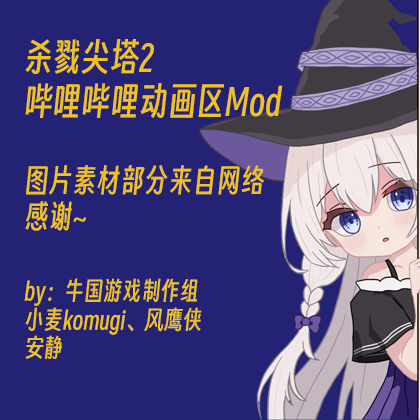
<style>
.page{position:relative;width:420px;height:420px;background:#232275}
.page>*{position:absolute;margin:0}
.t1{font:36px "SmileySans-Oblique";color:#efc224}
.t2{font:24px "SmileySans-Oblique";color:#efc224}
.t3{font:30px "SmileySans-Oblique";color:#efc224}
</style>
<div class="page">
<p class="t1" style="left:25px;top:39px;width:258px;height:79px">杀戮尖塔2<br>哔哩哔哩动画区Mod</p>
<p class="t2" style="left:24px;top:165px;width:240px;height:194px"><span class="t3">图片素材部分来自网络<br>感谢~<br><br></span>by：牛国游戏制作组<br>小麦komugi、风鹰侠<br>安静</p>
</div>
